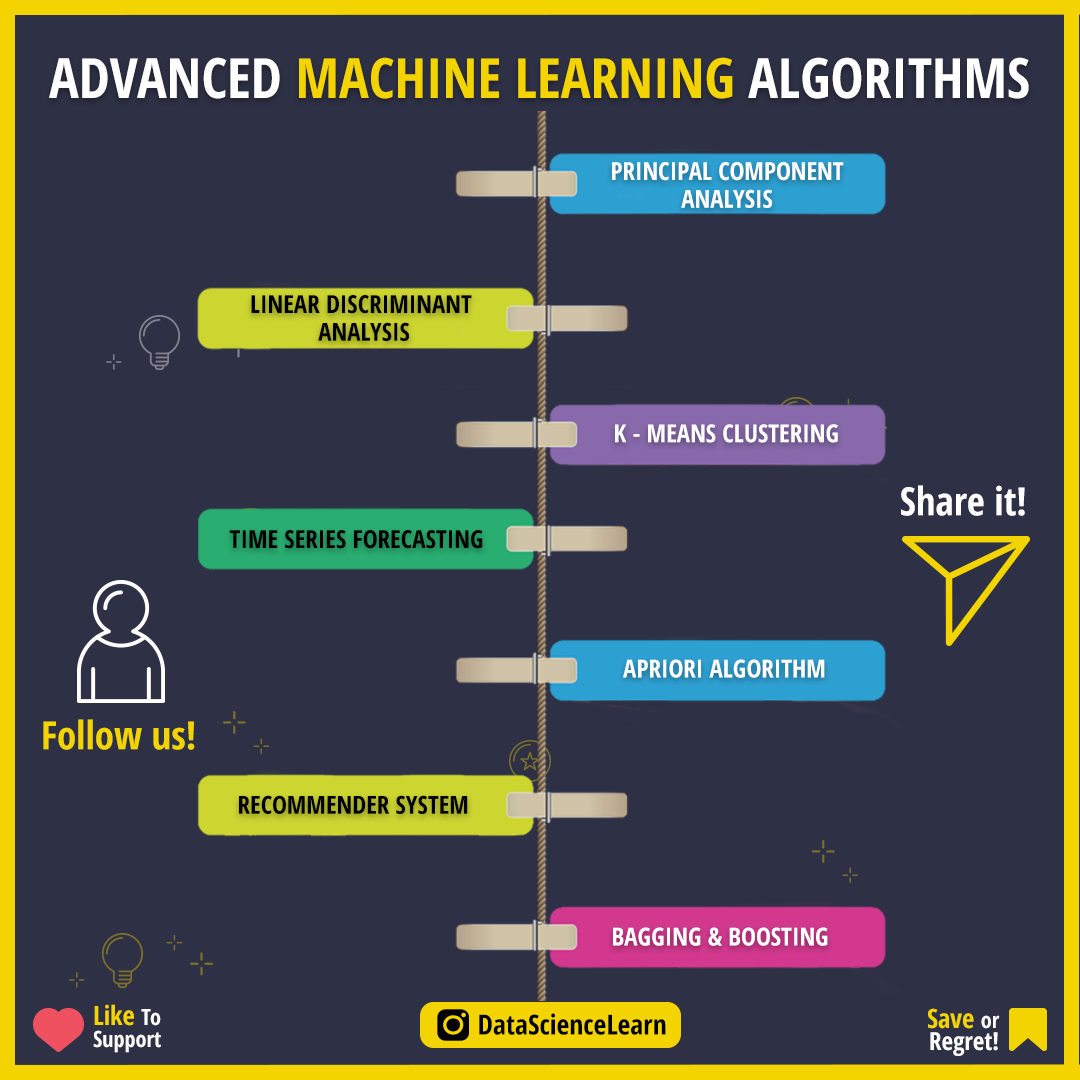
<style>
.page{position:relative;width:1080px;height:1080px;background:#2e3045}
.page>*{position:absolute;margin:0}
.t1{font:55.6px "OpenSans-CondensedBold";color:#f3d400}
.t2{font:55.6px "OpenSans-CondensedBold";color:#ffffff}
.t3{font:25px/27.8px "OpenSans-CondensedBold";color:#ffffff}
.t4{font:25px/27.8px "OpenSans-CondensedBold";color:#000000}
.t5{font:25px "OpenSans-CondensedBold";color:#ffffff}
.t6{font:38.9px "OpenSans-CondensedBold";color:#ffffff}
.t7{font:25px "OpenSans-CondensedBold";color:#000000}
.t8{font:38.9px "OpenSans-CondensedBold";color:#f3d400}
.t9{font:22.2px/22.2px "OpenSans-CondensedBold";color:#ffffff}
.t10{font:26.4px/22.2px "OpenSans-CondensedBold";color:#f3d400}
.t11{font:27.8px "OpenSans-CondensedBold";color:#000000}
.t12{font:25px/22.2px "OpenSans-CondensedBold";color:#ffffff}
</style>
<div class="page">
<p class="t1" style="left:49px;top:57px;width:980px;height:42px"><span class="t2">ADVANCED </span>MACHINE LEARNING <span class="t2">ALGORITHMS</span></p>
<p class="t3" style="left:612px;top:162px;width:232px;height:46px;text-align:center">PRINCIPAL COMPONENT<br>ANALYSIS</p>
<p class="t4" style="left:251px;top:295px;width:221px;height:46px;text-align:center">LINEAR DISCRIMINANT <br>ANALYSIS</p>
<p class="t5" style="left:615px;top:424px;width:223px;height:19px">K - MEANS CLUSTERING</p>
<p class="t6" style="left:901px;top:485px;width:124px;height:31px">Share it!</p>
<p class="t7" style="left:229px;top:530px;width:254px;height:19px">TIME SERIES FORECASTING</p>
<p class="t5" style="left:623px;top:659px;width:202px;height:19px">APRIORI ALGORITHM</p>
<p class="t8" style="left:43px;top:719px;width:152px;height:31px">Follow us!</p>
<p class="t7" style="left:239px;top:795px;width:229px;height:19px">RECOMMENDER SYSTEM</p>
<p class="t5" style="left:613px;top:927px;width:215px;height:19px">BAGGING &amp; BOOSTING</p>
<p class="t9" style="left:93px;top:1004px;width:68px;height:49px"><span class="t10">Like </span>To<br>Support</p>
<p class="t11" style="left:479px;top:1013px;width:187px;height:22px">DataScienceLearn</p>
<p class="t12" style="left:928px;top:1008px;width:72px;height:48px;text-align:right"><span class="t10">Save </span><span class="t9">or<br></span>Regret!</p>
</div>
